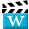
<style>
.page{position:relative;width:29px;height:29px;background:#ffffff}
.page>*{position:absolute;margin:0}
.t1{font:23px "Constantia";color:#ffffff}
</style>
<div class="page">
<p class="t1" style="left:7px;top:16px;width:18px;height:10px">w</p>
</div>
